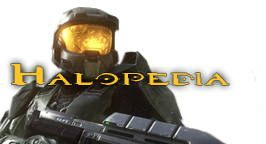
<style>
.page{position:relative;width:266px;height:144px;background:#ffffff}
.page>*{position:absolute;margin:0}
.t1{font:40px "Halo";color:#fec423}
</style>
<div class="page">
<p class="t1" style="left:11px;top:64px;width:218px;height:21px">Halopedia</p>
</div>
